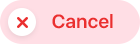
<style>
.page{position:relative;width:140px;height:44px;background:#ffdee5}
.page>*{position:absolute;margin:0}
.t1{font:19px "SFUIDisplay-Semibold";letter-spacing:0.02em;color:#ea2f2f}
</style>
<div class="page">
<p class="t1" style="left:52px;top:14px;width:61px;height:15px">Cancel</p>
</div>
